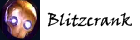
<style>
.page{position:relative;width:140px;height:40px;background:#ffffff}
.page>*{position:absolute;margin:0}
.t1{font:12px "VinerHandITC";color:#000000}
</style>
<div class="page">
<p class="t1" style="left:47px;top:12px;width:85px;height:15px">Blitzcrank</p>
</div>
